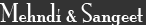
<style>
.page{position:relative;width:146px;height:25px;background:#333333}
.page>*{position:absolute;margin:0}
.t1{font:24px "MonaLisaSolidITCTT";color:#fefefe}
</style>
<div class="page">
<p class="t1" style="left:0px;top:3px;width:143px;height:23px">Mehndi &amp; Sangeet</p>
</div>
